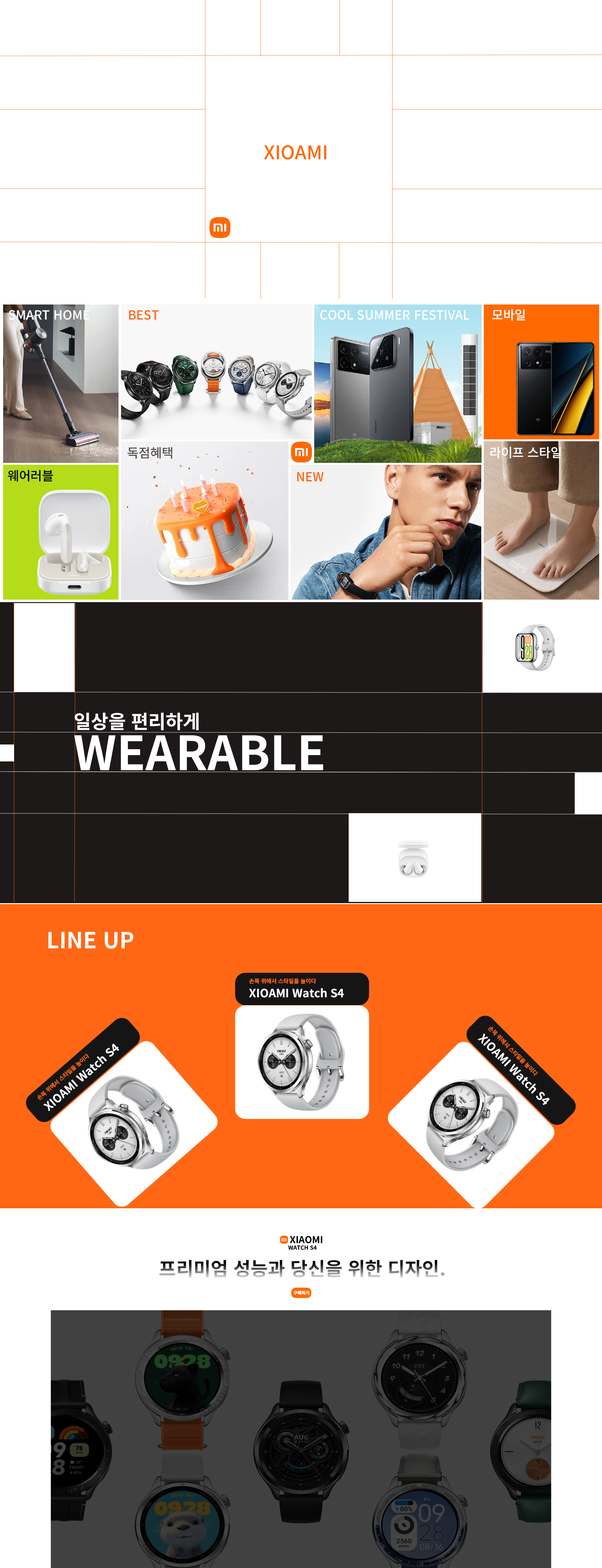
<style>
.page{position:relative;width:602px;height:1568px;background:#ffffff}
.page>*{position:absolute;margin:0}
.t1{font:18.8px "NotoSansKR-Medium";color:#ff6900}
.t2{font:12.5px "NotoSansKR-Medium";color:#ffffff}
.t3{font:12.5px "NotoSansKR-Medium";color:#ff6714}
.t4{font:12.6px "NotoSansKR-Medium";color:#595454}
.t5{font:12.5px "NotoSansKR-Medium";color:#000000}
.t6{font:18.8px "NotoSansKR-Bold";color:#ffffff}
.t7{font:47px "NotoSansKR-Bold";color:#ffffff}
.t8{font:22.1px "NotoSansKR-Bold";color:#ffffff}
.t9{font:11.3px "NotoSansKR-Bold";color:#ffffff}
.t10{font:5.6px "NotoSansKR-Bold";color:#ff6714}
.t11{font:9.4px "NotoSansKR-Bold";color:#000000}
.t12{font:5.6px "NotoSansKR-Bold";color:#000000}
.t13{font:18.8px "NotoSansKR-Bold"}
.t14{font:4.4px "NotoSansKR-Bold";color:#ffffff}
</style>
<div class="page">
<p class="t1" style="left:264px;top:145px;width:62px;height:15px">XIOAMI</p>
<p class="t2" style="left:8px;top:310px;width:81px;height:10px">SMART HOME</p>
<p class="t3" style="left:129px;top:310px;width:30px;height:10px">BEST</p>
<p class="t2" style="left:320px;top:310px;width:150px;height:10px">COOL SUMMER FESTIVAL</p>
<p class="t2" style="left:492px;top:309px;width:33px;height:12px">모바일</p>
<p class="t4" style="left:127px;top:447px;width:45px;height:12px">독점혜택</p>
<p class="t2" style="left:490px;top:447px;width:71px;height:11px">라이프 스타일</p>
<p class="t5" style="left:8px;top:470px;width:45px;height:12px">웨어러블</p>
<p class="t3" style="left:297px;top:472px;width:27px;height:10px">NEW</p>
<p class="t6" style="left:75px;top:712px;width:124px;height:18px">일상을 편리하게</p>
<p class="t7" style="left:74px;top:735px;width:249px;height:35px">WEARABLE</p>
<p class="t8" style="left:48px;top:932px;width:85px;height:17px">LINE UP</p>
<p class="t9" style="left:249px;top:988px;width:95px;height:10px">XIOAMI Watch S4</p>
<p class="t10" style="left:249px;top:978px;width:67px;height:6px">손목 위에서 스타일을 높이다</p>
<p class="t9" style="left:478px;top:1033px;width:72px;height:72px;rotate:45deg">XIOAMI Watch S4</p>
<p class="t9" style="left:43px;top:1043px;width:76px;height:68px;rotate:-41deg">XIOAMI Watch S4</p>
<p class="t11" style="left:290px;top:1236px;width:32px;height:7px">XIAOMI</p>
<p class="t12" style="left:288px;top:1245px;width:29px;height:5px">WATCH S4</p>
<p class="t13" style="left:159px;top:1260px;width:286px;height:18px">프리미엄 성능과 당신을 위한 디자인.</p>
<p class="t14" style="left:294px;top:1291px;width:15px;height:4px">구매하기</p>
</div>
